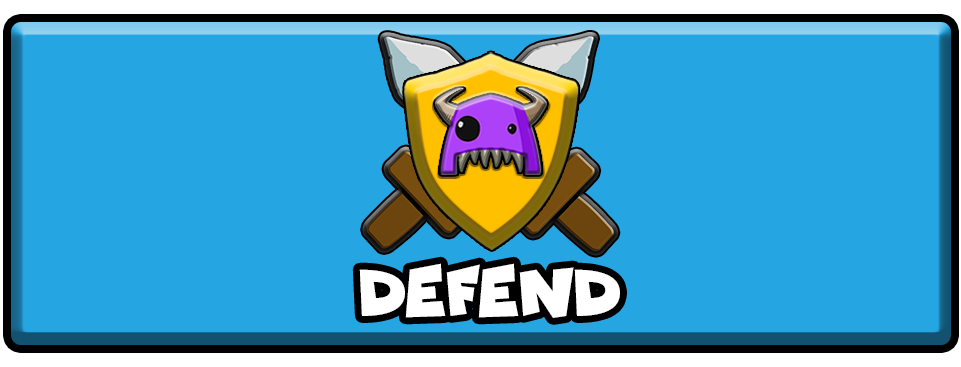
<style>
.page{position:relative;width:961px;height:367px;background:#25a5e1}
.page>*{position:absolute;margin:0}
.t1{font:67.6px "Funhouse";color:#ffffff}
</style>
<div class="page">
<p class="t1" style="left:359px;top:263px;width:261px;height:55px">DEFEND</p>
</div>
